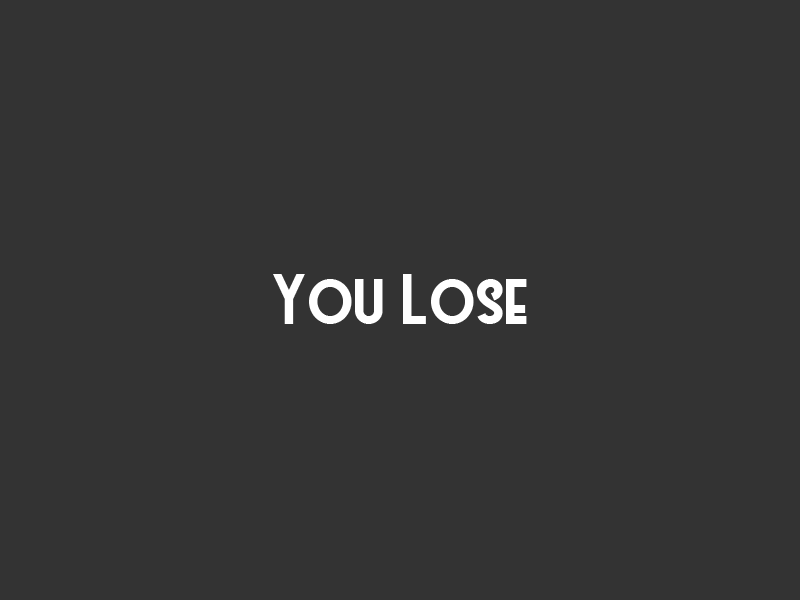
<style>
.page{position:relative;width:800px;height:600px;background:#333333}
.page>*{position:absolute;margin:0}
.t1{font:63.5px "Westmeath";color:#ffffff}
</style>
<div class="page">
<p class="t1" style="left:273px;top:274px;width:254px;height:50px">You Lose</p>
</div>
